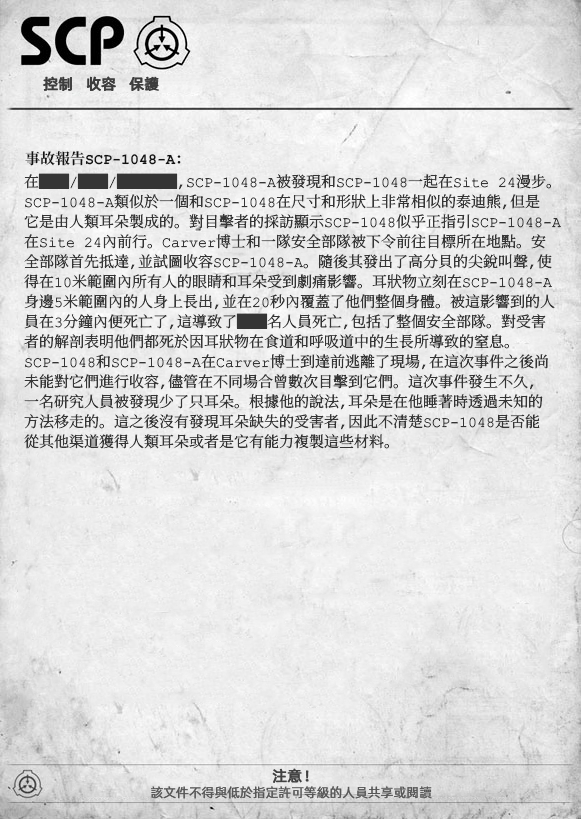
<style>
.page{position:relative;width:581px;height:819px}
.page>*{position:absolute;margin:0}
.t1{font:15px "AlibabaPuHuiTiR";color:#3d3d3d;font-weight:bold}
.t2{font:15px "ContainmentBreach-Bold";color:#121212}
.t3{font:15px/20px "ContainmentBreach-Regular";color:#353535}
.t4{font:15px "AlibabaPuHuiTiR";color:#414141;font-weight:bold}
.t5{font:13px "AlibabaPuHuiTiR";color:#575757}
</style>
<div class="page">
<p class="t1" style="left:43px;top:76px;width:115px;height:15px">控制   收容   保护</p>
<p class="t1" style="left:43px;top:76px;width:116px;height:15px">控制   收容   保護</p>
<p class="t2" style="left:25px;top:151px;width:156px;height:15px">事故報告SCP-1048-A：</p>
<p class="t3" style="left:24px;top:173px;width:537px;height:276px">在██/██/████,SCP-1048-A被發現和SCP-1048一起在Site 24漫步。<br>SCP-1048-A類似於一個和SCP-1048在尺寸和形狀上非常相似的泰迪熊，但是<br>它是由人類耳朵製成的。對目擊者的採訪顯示SCP-1048似乎正指引SCP-1048-A<br>在Site 24內前行。Carver博士和一隊安全部隊被下令前往目標所在地點。安<br>全部隊首先抵達，並試圖收容SCP-1048-A。隨後其發出了高分貝的尖銳叫聲，使<br>得在10米範圍內所有人的眼睛和耳朵受到劇痛影響。耳狀物立刻在SCP-1048-A<br>身邊5米範圍內的人身上長出，並在20秒內覆蓋了他們整個身體。被這影響到的人<br>員在3分鐘內便死亡了，這導致了██名人員死亡，包括了整個安全部隊。對受害<br>者的解剖表明他們都死於因耳狀物在食道和呼吸道中的生長所導致的窒息。<br>SCP-1048和SCP-1048-A在Carver博士到達前逃離了現場，在這次事件之後尚<br>未能對它們進行收容，儘管在不同場合曾數次目擊到它們。這次事件發生不久，<br>一名研究人員被發現少了只耳朵。根據他的說法，耳朵是在他睡著時透過未知的<br>方法移走的。這之後沒有發現耳朵缺失的受害者，因此不清楚SCP-1048是否能<br>從其他渠道獲得人類耳朵或者是它有能力複製這些材料。</p>
<p class="t4" style="left:272px;top:768px;width:37px;height:15px">注意！</p>
<p class="t5" style="left:151px;top:786px;width:281px;height:13px">該文件不得與低於指定許可等級的人員共享或閱讀</p>
</div>
